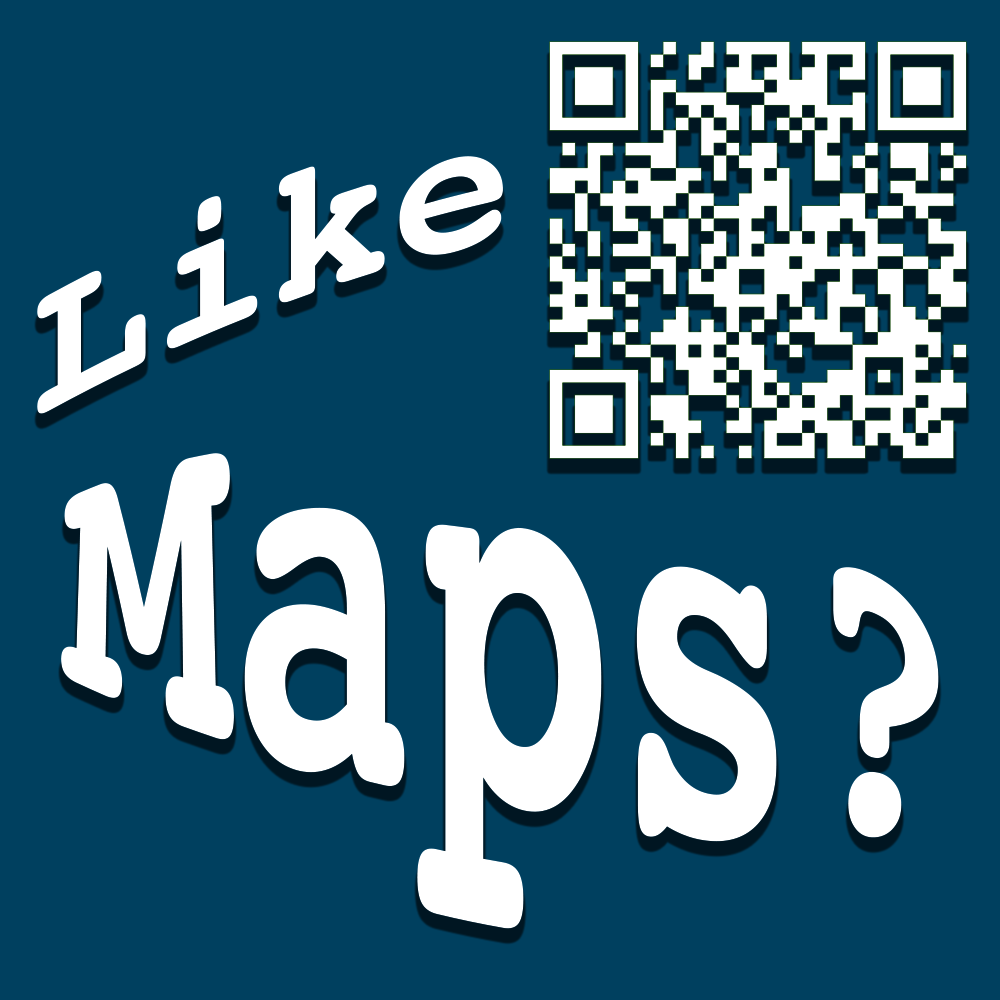
<style>
.page{position:relative;width:1000px;height:1000px;background:#00405f}
.page>*{position:absolute;margin:0}
.t1{font:200px "Courier-Bold";color:#ffffff}
.t2{font:300px "Courier-Bold";color:#ffffff}
</style>
<div class="page">
<p class="t1" style="left:37px;top:156px;width:466px;height:258px;rotate:-10deg">Like</p>
<p class="t2" style="left:61px;top:453px;width:878px;height:476px;rotate:9deg">Maps?</p>
</div>
